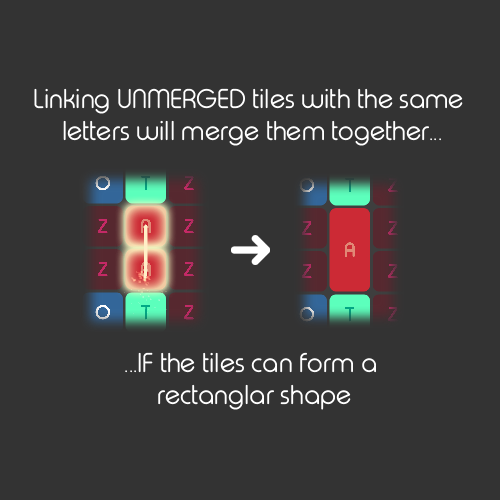
<style>
.page{position:relative;width:500px;height:500px;background:#333333}
.page>*{position:absolute;margin:0}
.t1{font:27px "TypoRoundLightDemo";color:#ffffff}
</style>
<div class="page">
<p class="t1" style="left:34px;top:88px;width:429px;height:58px;text-align:center">Linking UNMERGED tiles with the same <br>letters will merge them together...</p>
<p class="t1" style="left:125px;top:352px;width:251px;height:58px;text-align:center">...IF the tiles can form a <br>rectanglar shape</p>
</div>
